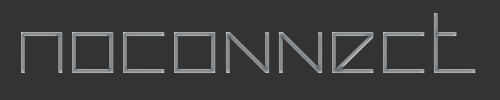
<style>
.page{position:relative;width:500px;height:100px;background:#333333}
.page>*{position:absolute;margin:0}
.t1{font:120px "AuricomRegular";letter-spacing:0.05em;color:#8d9194}
</style>
<div class="page">
<p class="t1" style="left:21px;top:13px;width:455px;height:60px">NoConnect</p>
</div>
